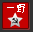
<style>
.page{position:relative;width:33px;height:32px;background:#c50000}
.page>*{position:absolute;margin:0}
.t1{font:10.4px "SimSun";color:#ffffff}
</style>
<div class="page">
<p class="t1" style="left:7px;top:4px;width:18px;height:9px">一野</p>
</div>
